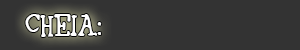
<style>
.page{position:relative;width:300px;height:50px;background:#333333}
.page>*{position:absolute;margin:0}
.t1{font:25px "42";color:#ffffff}
</style>
<div class="page">
<p class="t1" style="left:25px;top:14px;width:77px;height:23px">Cheia:</p>
</div>
